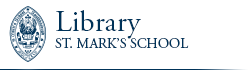
<style>
.page{position:relative;width:250px;height:70px;background:#ffffff}
.page>*{position:absolute;margin:0}
.t1{font:14px "AGaramondPro-Regular";color:#003359}
.t2{font:30px "AGaramondPro-Regular";color:#003359}
</style>
<div class="page">
<p class="t1" style="left:55px;top:10px;width:134px;height:38px"><span class="t2">Library<br></span>ST. MARK’S SCHOOL</p>
</div>
